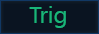
<style>
.page{position:relative;width:99px;height:34px;background:#0a1421}
.page>*{position:absolute;margin:0}
.t1{font:23.3px "SegoeUISymbol";color:#19b579}
</style>
<div class="page">
<p class="t1" style="left:29px;top:6px;width:37px;height:22px">Trig</p>
</div>
